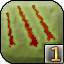
<style>
.page{position:relative;width:64px;height:64px}
.page>*{position:absolute;margin:0}
.t1{font:18px "NewsGothicMT-Bold"}
</style>
<div class="page">
<p class="t1" style="left:51px;top:47px;width:9px;height:14px">1</p>
</div>
